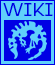
<style>
.page{position:relative;width:55px;height:71px;background:#60d0fa}
.page>*{position:absolute;margin:0}
.t1{font:17.4px "Discovery-Regular";letter-spacing:-0.02em;color:#0000e4;scale:1.04 1}
</style>
<div class="page">
<p class="t1" style="left:3px;top:3px;width:50px;height:13px">WIKI</p>
</div>
